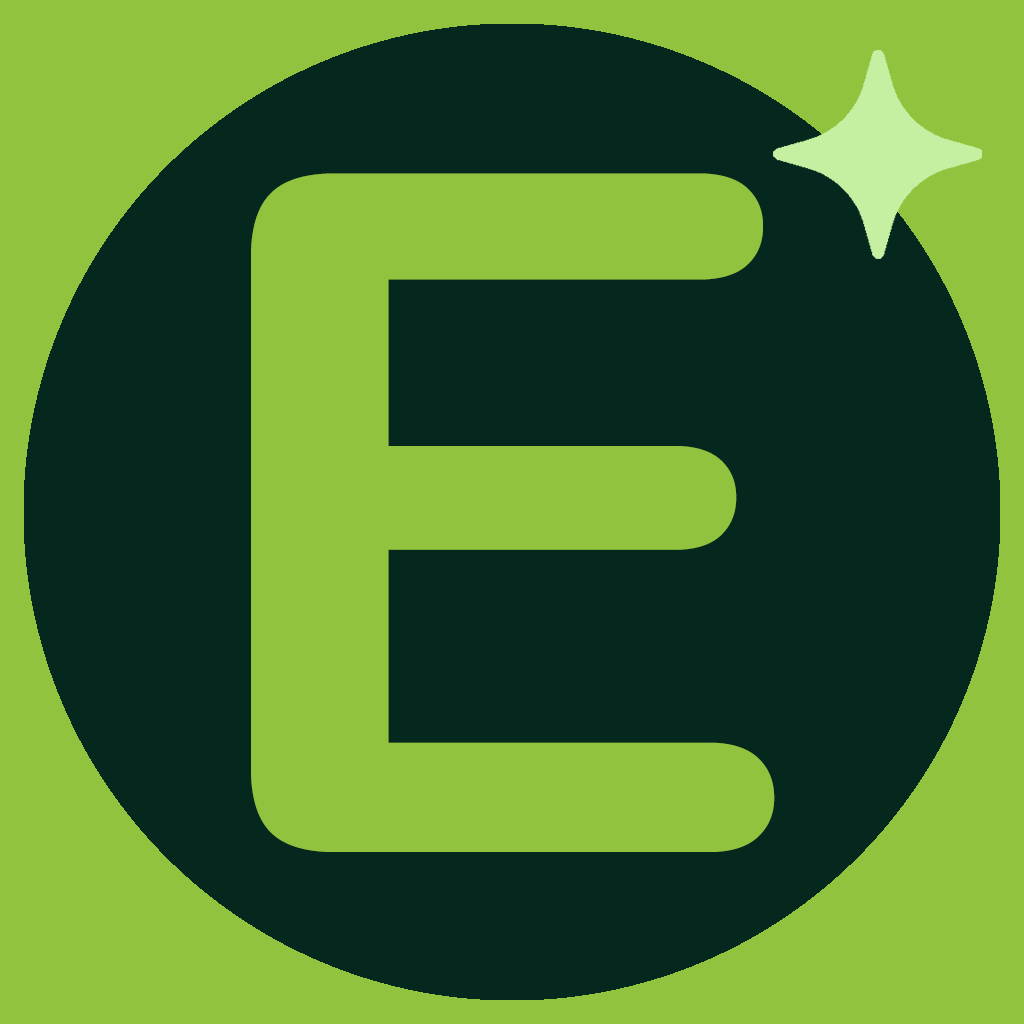
<style>
.page{position:relative;width:1024px;height:1024px;background:#05281e}
.page>*{position:absolute;margin:0}
.t1{font:948px "ArialRoundedMTBold";color:#92c33e}
</style>
<div class="page">
<p class="t1" style="left:251px;top:173px;width:524px;height:679px">E</p>
</div>
